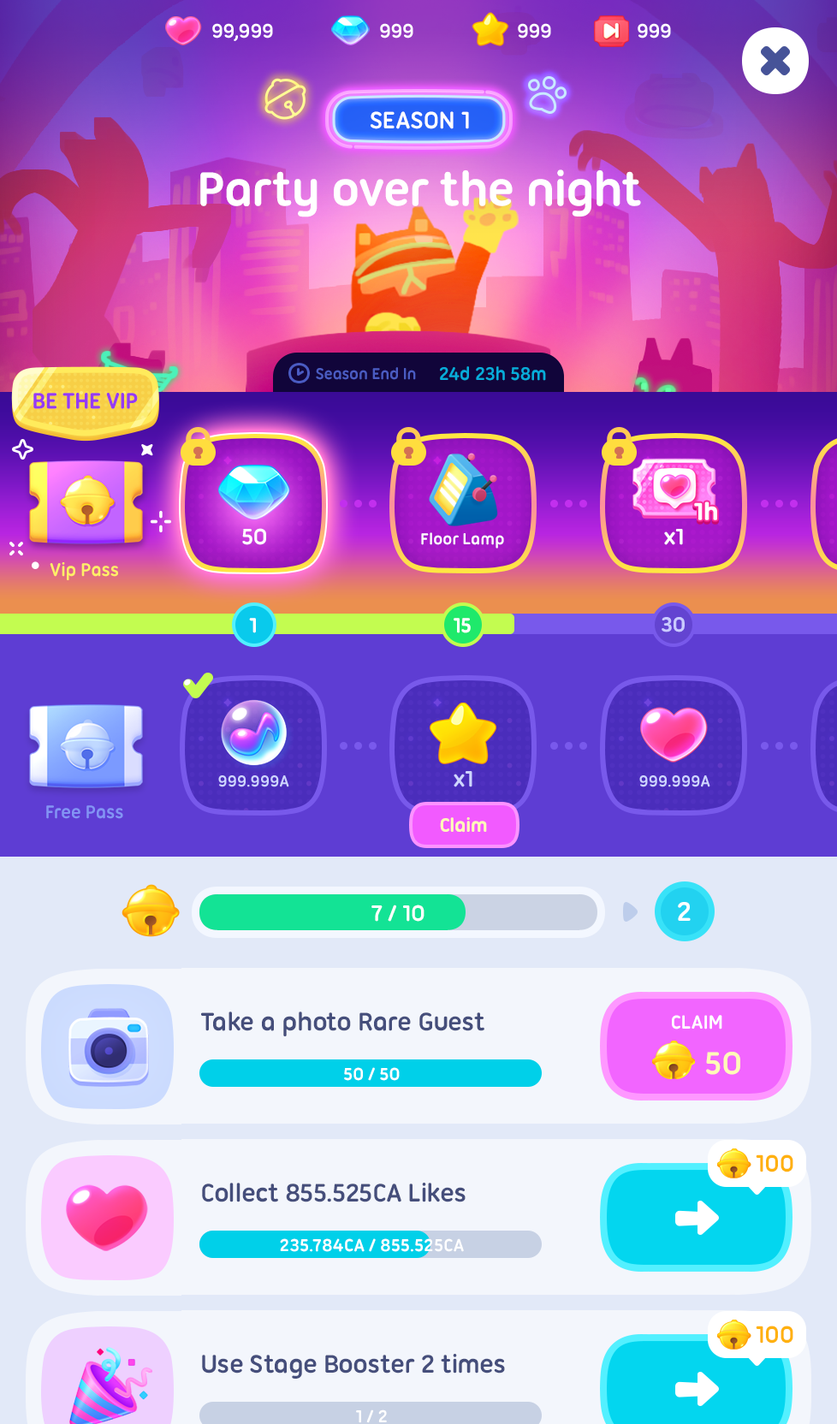
<style>
.page{position:relative;width:837px;height:1424px}
.page>*{position:absolute;margin:0}
.t1{font:25.7px "UbuntuTitling-Bold";letter-spacing:-0.025em;color:#ffffff;text-transform:uppercase}
.t2{font:51.4px "UbuntuTitling-Bold";letter-spacing:-0.025em;color:#ffffff}
.t3{font:17.1px "UbuntuTitling-Bold";letter-spacing:-0.025em;color:#4a5bc2}
.t4{font:19.7px "UbuntuTitling-Bold";letter-spacing:-0.025em;color:#07acdb}
.t5{font:24px "UbuntuTitling-Bold";letter-spacing:-0.025em;color:#953af3;text-transform:uppercase}
.t6{font:25.7px "UbuntuTitling-Bold";letter-spacing:-0.025em;color:#ffffff;font-weight:bold}
.t7{font:24px "UbuntuTitling-Bold";letter-spacing:-0.025em;color:#ffffff}
.t8{font:17.1px "UbuntuTitling-Bold";letter-spacing:-0.025em;color:#ffffff}
.t9{font:19.7px "UbuntuTitling-Bold";letter-spacing:-0.025em;color:#ffef66}
.t10{font:22.3px "UbuntuTitling-Bold";letter-spacing:-0.025em;color:#c9caff;text-transform:uppercase}
.t11{font:22.3px "UbuntuTitling-Bold";letter-spacing:-0.025em;color:#ffffff;text-transform:uppercase}
.t12{font:22.3px "UbuntuTitling-Bold";letter-spacing:-0.025em;color:#ffffff;text-transform:uppercase;scale:0.96 1}
.t13{font:24px "UbuntuTitling-Bold";letter-spacing:-0.025em;color:#ced5ff}
.t14{font:17.1px "UbuntuTitling-Bold";letter-spacing:-0.025em;color:#ced5ff}
.t15{font:19.7px "UbuntuTitling-Bold";letter-spacing:-0.025em;color:#8394f4}
.t16{font:20.5px "UbuntuTitling-Bold";letter-spacing:-0.025em;color:#fefbb7}
.t17{font:29.1px "UbuntuTitling-Bold";letter-spacing:-0.025em;color:#ffffff;text-transform:uppercase}
.t18{font:27.4px "UbuntuTitling-Bold";letter-spacing:-0.025em;color:#454e7b}
.t19{font:20.5px "UbuntuTitling-Bold";letter-spacing:-0.025em;color:#ffffff;text-transform:uppercase}
.t20{font:34.2px "UbuntuTitling-Bold";letter-spacing:-0.025em;color:#fefbb7}
.t21{font:18.8px "UbuntuTitling-Bold";letter-spacing:-0.025em;color:#ffffff}
.t22{font:25.7px "UbuntuTitling-Bold";letter-spacing:-0.025em;color:#ffb10e}
</style>
<div class="page">
<p class="t1" style="left:371px;top:111px;width:98px;height:18px">Season 1</p>
<p class="t2" style="left:200px;top:169px;width:441px;height:48px">Party over the night</p>
<p class="t3" style="left:316px;top:367px;width:100px;height:13px">Season End In</p>
<p class="t4" style="left:440px;top:366px;width:106px;height:15px">24d 23h 58m</p>
<p class="t5" style="left:33px;top:393px;width:105px;height:16px">Be the VIP</p>
<p class="t6" style="left:694px;top:502px;width:23px;height:18px">1h</p>
<p class="t7" style="left:242px;top:528px;width:24px;height:17px">50</p>
<p class="t8" style="left:421px;top:532px;width:83px;height:17px">Floor Lamp</p>
<p class="t7" style="left:664px;top:529px;width:19px;height:16px">x1</p>
<p class="t9" style="left:50px;top:562px;width:68px;height:18px">Vip Pass</p>
<p class="t10" style="left:662px;top:617px;width:23px;height:16px">30</p>
<p class="t11" style="left:249px;top:618px;width:7px;height:15px">1</p>
<p class="t12" style="left:454px;top:618px;width:17px;height:15px">15</p>
<p class="t13" style="left:454px;top:771px;width:19px;height:17px">x1</p>
<p class="t14" style="left:218px;top:776px;width:71px;height:12px">999.999A</p>
<p class="t14" style="left:639px;top:776px;width:71px;height:12px">999.999A</p>
<p class="t15" style="left:46px;top:805px;width:77px;height:14px">Free Pass</p>
<p class="t16" style="left:440px;top:817px;width:47px;height:16px">Claim</p>
<p class="t7" style="left:372px;top:905px;width:53px;height:17px">7 / 10</p>
<p class="t17" style="left:678px;top:902px;width:13px;height:19px">2</p>
<p class="t18" style="left:201px;top:1012px;width:283px;height:25px">Take a photo Rare Guest</p>
<p class="t19" style="left:672px;top:1015px;width:50px;height:15px">Claim</p>
<p class="t20" style="left:706px;top:1052px;width:34px;height:23px">50</p>
<p class="t21" style="left:344px;top:1067px;width:56px;height:14px">50 / 50</p>
<p class="t22" style="left:756px;top:1155px;width:38px;height:18px">100</p>
<p class="t18" style="left:202px;top:1183px;width:264px;height:20px">Collect 855.525CA Likes</p>
<p class="t21" style="left:280px;top:1239px;width:184px;height:13px">235.784CA / 855.525CA</p>
<p class="t22" style="left:756px;top:1326px;width:38px;height:18px">100</p>
<p class="t18" style="left:202px;top:1354px;width:303px;height:25px">Use Stage Booster 2 times</p>
<p class="t21" style="left:356px;top:1410px;width:31px;height:14px">1 / 2</p>
</div>
